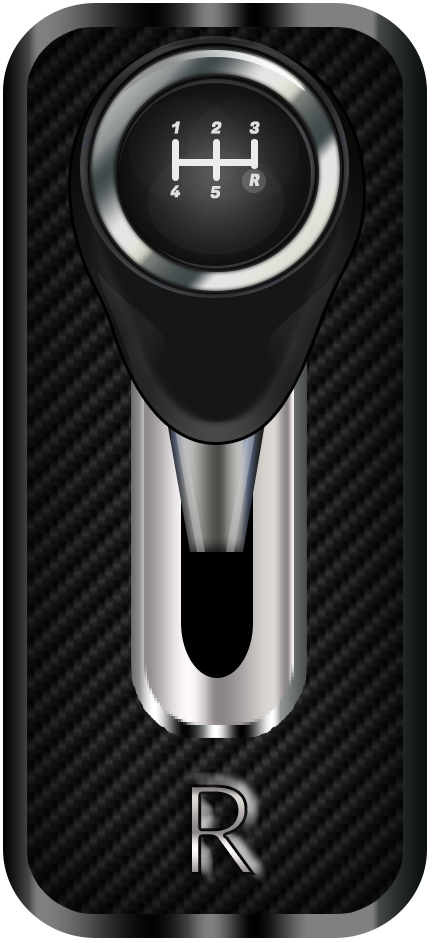
<style>
.page{position:relative;width:432px;height:943px}
.page>*{position:absolute;margin:0}
.t1{font:16.5px "FugazOne-Regular";color:#dfdfdf}
</style>
<div class="page">
<p class="t1" style="left:172px;top:121px;width:8px;height:13px">1</p>
<p class="t1" style="left:211px;top:121px;width:11px;height:13px">2</p>
<p class="t1" style="left:249px;top:121px;width:11px;height:13px">3</p>
<p class="t1" style="left:249px;top:173px;width:11px;height:13px">R</p>
<p class="t1" style="left:170px;top:185px;width:11px;height:13px">4</p>
<p class="t1" style="left:210px;top:186px;width:11px;height:13px">5</p>
</div>
